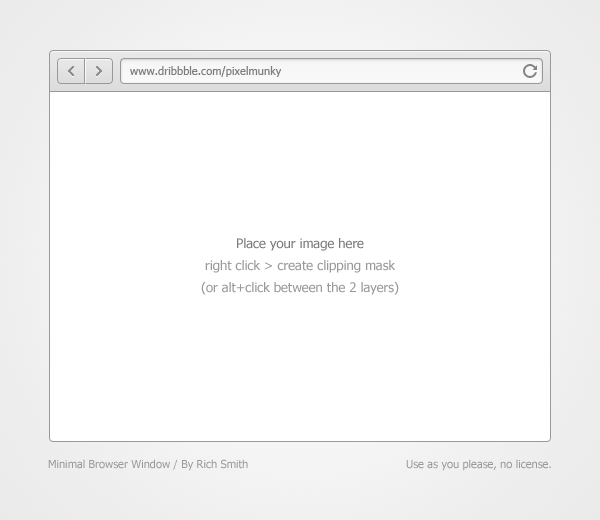
<style>
.page{position:relative;width:600px;height:520px;background:#ffffff}
.page>*{position:absolute;margin:0}
.t1{font:11px "Tahoma";letter-spacing:0.006em;color:#7d7d7d}
.t2{font:13px/22px "Tahoma";color:#999999}
.t3{font:13px/22px "Tahoma";color:#7b7a7a}
.t4{font:11px "Tahoma";color:#999999}
</style>
<div class="page">
<p class="t1" style="left:130px;top:66px;width:152px;height:11px">www.dribbble.com/pixelmunky</p>
<p class="t2" style="left:201px;top:238px;width:198px;height:57px;text-align:center"><span class="t3">Place your image here<br></span>right click &gt; create clipping mask<br>(or alt+click between the 2 layers)</p>
<p class="t4" style="left:48px;top:459px;width:200px;height:12px">Minimal Browser Window / By Rich Smith</p>
<p class="t4" style="left:406px;top:459px;width:145px;height:12px">Use as you please, no license.</p>
</div>
